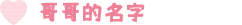
<style>
.page{position:relative;width:242px;height:25px;background:#ffffff}
.page>*{position:absolute;margin:0}
.t1{font:21.2px "shetumodengxiaofangti";color:#ef8299;font-weight:bold}
</style>
<div class="page">
<p class="t1" style="left:40px;top:2px;width:105px;height:20px">哥哥的名字</p>
</div>
